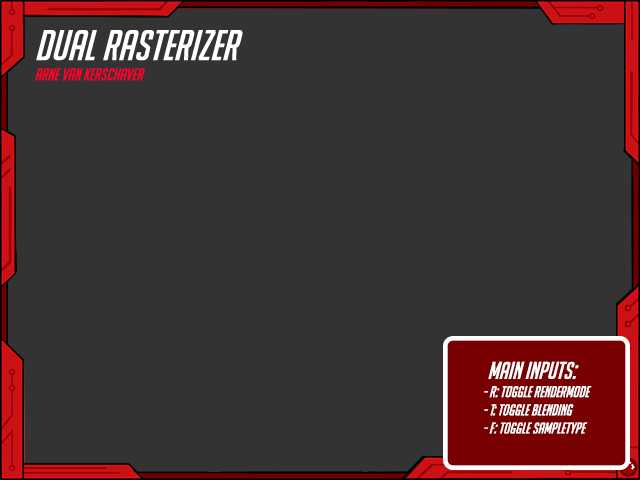
<style>
.page{position:relative;width:640px;height:480px;background:#333333}
.page>*{position:absolute;margin:0}
.t1{font:16.9px "BigNoodleTooOblique";color:#ff002a}
.t2{font:41.9px "BigNoodleTooOblique";color:#ffffff}
.t3{font:15.2px "BigNoodleTooOblique";color:#ffffff}
.t4{font:23.5px "BigNoodleTooOblique";color:#ffffff}
</style>
<div class="page">
<p class="t1" style="left:35px;top:30px;width:208px;height:51px"><span class="t2">Dual Rasterizer<br></span>Arne Van Kerschaver</p>
<p class="t3" style="left:484px;top:361px;width:108px;height:73px"><span class="t4">Main Inputs:<br></span>- R: Toggle Rendermode<br>- T: Toggle Blending<br>- F: Toggle Sampletype</p>
</div>
